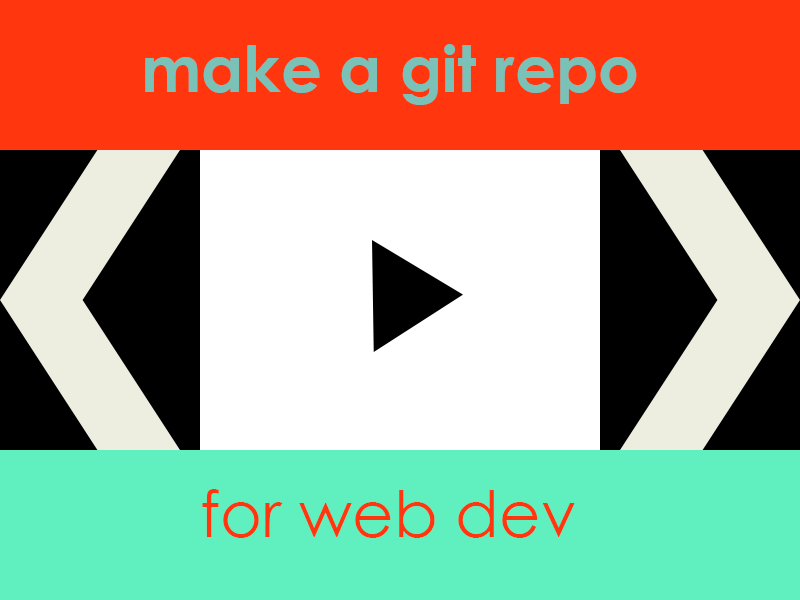
<style>
.page{position:relative;width:800px;height:600px;background:#60f0c0}
.page>*{position:absolute;margin:0}
.t1{font:12px "MyriadPro-Regular";color:#7ac1b7}
.t2{font:12px "CenturyGothic";color:#ff360e}
</style>
<div class="page">
<p class="t1" style="left:145px;top:44px;width:492px;height:61px">make a git repo</p>
<p class="t2" style="left:202px;top:489px;width:373px;height:49px">for web dev</p>
</div>
